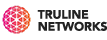
<style>
.page{position:relative;width:107px;height:40px;background:#ffffff}
.page>*{position:absolute;margin:0}
.t1{font:12px/12px "AvenirLTStd-Black";color:#222222}
</style>
<div class="page">
<p class="t1" style="left:37px;top:10px;width:70px;height:21px">TRULINE<br>NETWORKS</p>
</div>
